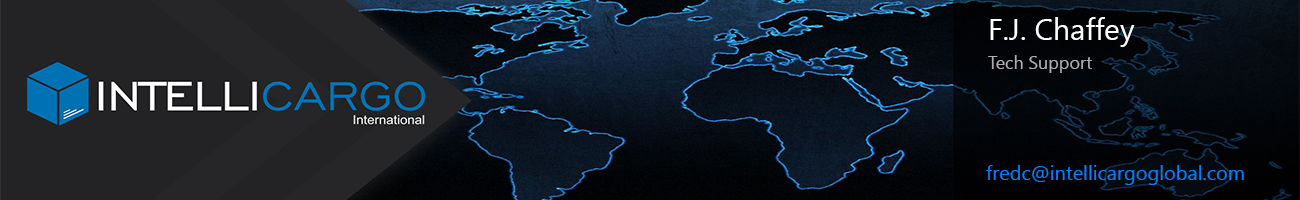
<style>
.page{position:relative;width:1300px;height:200px}
.page>*{position:absolute;margin:0}
.t1{font:30px "SegoeUI";color:#ffffff}
.t2{font:18px "SegoeUI";color:#adadad}
.t3{font:20px "SegoeUI";color:#0080ff}
</style>
<div class="page">
<p class="t1" style="left:990px;top:17px;width:145px;height:30px">F.J. Chaffey</p>
<p class="t2" style="left:988px;top:55px;width:104px;height:18px">Tech Support</p>
<p class="t3" style="left:986px;top:165px;width:258px;height:20px">fredc@intellicargoglobal.com</p>
</div>
